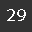
<style>
.page{position:relative;width:32px;height:32px;background:#333333}
.page>*{position:absolute;margin:0}
.t1{font:17.8px "MyriadPro-Regular";color:#ffffff;scale:1.12 1}
</style>
<div class="page">
<p class="t1" style="left:7px;top:9px;width:19px;height:12px">29</p>
</div>
